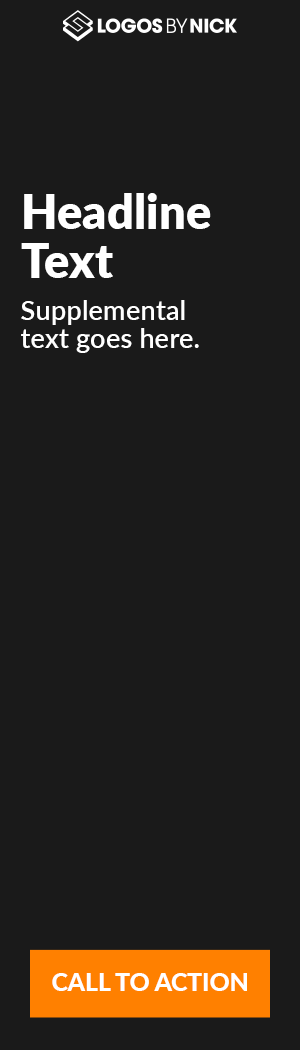
<style>
.page{position:relative;width:300px;height:1050px;background:#1a1a1a}
.page>*{position:absolute;margin:0}
.t1{font:47.3px/48.4px "Lato-Black";color:#ffffff}
.t2{font:27.5px/28.1px "Lato-Semibold";color:#ffffff}
.t3{font:24.6px "Lato-Heavy";color:#ffffff}
</style>
<div class="page">
<p class="t1" style="left:21px;top:193px;width:190px;height:85px">Headline<br>Text</p>
<p class="t2" style="left:21px;top:300px;width:178px;height:53px">Supplemental<br>text goes here.</p>
<p class="t3" style="left:52px;top:973px;width:195px;height:18px">CALL TO ACTION</p>
</div>
